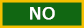
<style>
.page{position:relative;width:84px;height:28px;background:#116712}
.page>*{position:absolute;margin:0}
.t1{font:17px "Verdana";color:#ffffff;font-weight:bold}
</style>
<div class="page">
<p class="t1" style="left:30px;top:7px;width:25px;height:13px">NO</p>
</div>
